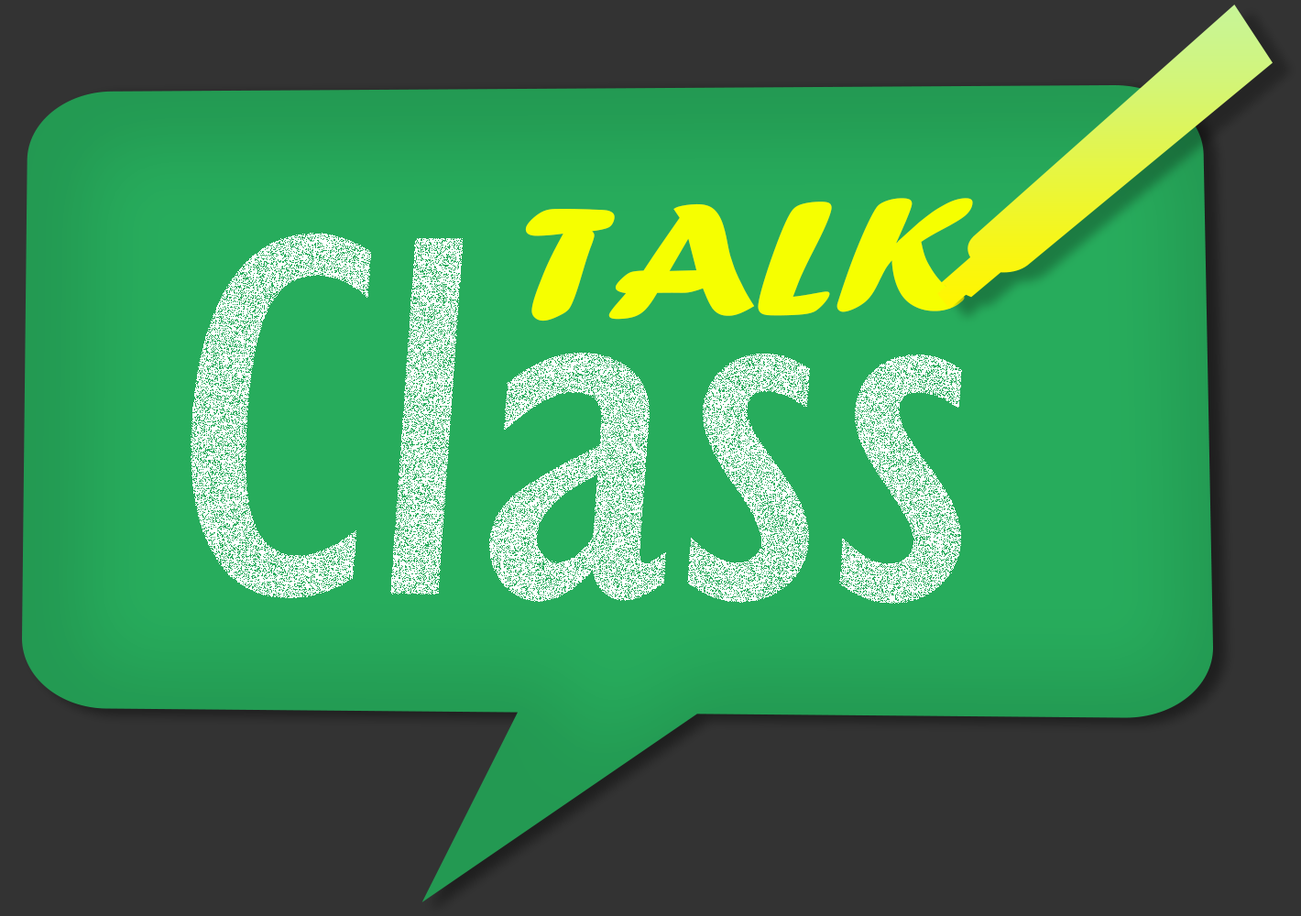
<style>
.page{position:relative;width:1301px;height:916px;background:#333333}
.page>*{position:absolute;margin:0}
.t1{font:166.6px "ForteMT";color:#f6ff00;scale:1.23 1}
.t2{font:533.6px "GillSansMT-Condensed";color:#ffffff;scale:1.14 1}
</style>
<div class="page">
<p class="t1" style="left:525px;top:198px;width:448px;height:124px;rotate:-1deg">TALK</p>
<p class="t2" style="left:191px;top:233px;width:771px;height:371px">Class</p>
</div>
